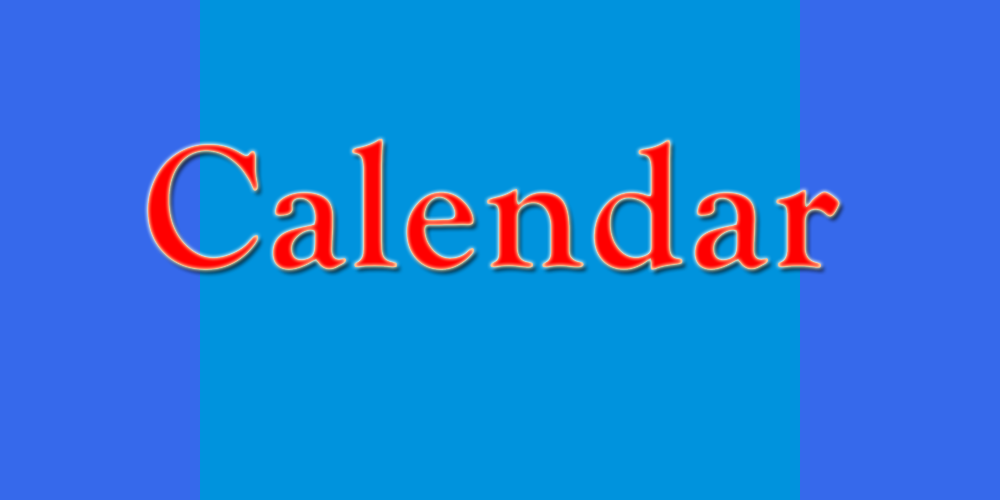
<style>
.page{position:relative;width:1000px;height:500px;background:#0093dd}
.page>*{position:absolute;margin:0}
.t1{font:180px "GoudyOldStyleT-Bold";letter-spacing:0.025em}
</style>
<div class="page">
<p class="t1" style="left:147px;top:138px;width:693px;height:132px">Calendar</p>
</div>
